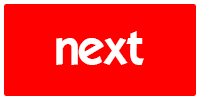
<style>
.page{position:relative;width:200px;height:100px;background:#ff0000}
.page>*{position:absolute;margin:0}
.t1{font:48px "ELEGANCE";color:#ffffff}
</style>
<div class="page">
<p class="t1" style="left:56px;top:31px;width:88px;height:34px">next</p>
</div>
